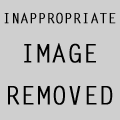
<style>
.page{position:relative;width:120px;height:120px;background:#cfcfcf}
.page>*{position:absolute;margin:0}
.t1{font:14px "LetterGothicStd";color:#000000;font-weight:bold}
.t2{font:25px "LetterGothicStd";color:#000000;font-weight:bold}
</style>
<div class="page">
<p class="t1" style="left:4px;top:12px;width:112px;height:12px">INAPPROPRIATE</p>
<p class="t2" style="left:24px;top:43px;width:72px;height:20px">IMAGE</p>
<p class="t2" style="left:8px;top:85px;width:105px;height:20px">REMOVED</p>
</div>
